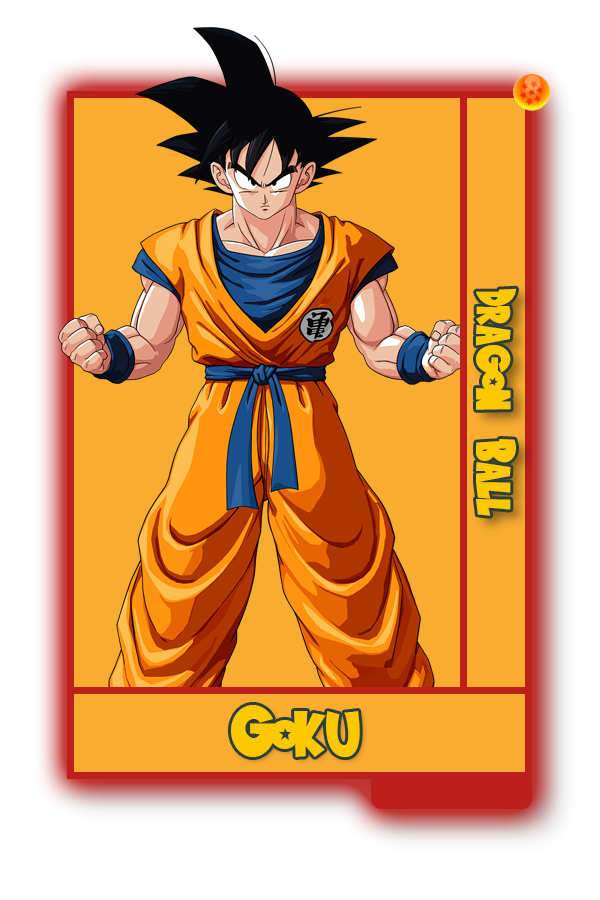
<style>
.page{position:relative;width:600px;height:900px;background:#f8ac30}
.page>*{position:absolute;margin:0}
.t1{font:56.9px "SaiyanSans";color:#fec800}
.t2{font:75px "SaiyanSans";color:#fec800}
</style>
<div class="page">
<p class="t1" style="left:476px;top:288px;width:40px;height:228px;rotate:90deg">Dragon Ball</p>
<p class="t2" style="left:231px;top:705px;width:129px;height:52px">Goku</p>
</div>
